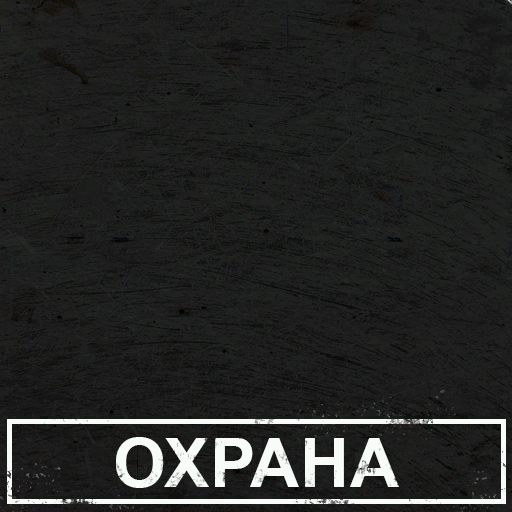
<style>
.page{position:relative;width:512px;height:512px}
.page>*{position:absolute;margin:0}
.t1{font:68px "Arial-BoldMT";letter-spacing:0.01em;color:#f8fcf8}
</style>
<div class="page">
<p class="t1" style="left:116px;top:437px;width:283px;height:51px">ОХРАНА</p>
</div>
